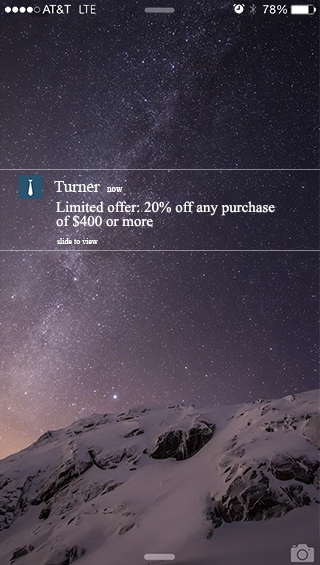
<style>
.page{position:relative;width:320px;height:565px}
.page>*{position:absolute;margin:0}
.t1{font:17px "TimesNewRomanPSMT";color:#ffffff}
.t2{font:9px "TimesNewRomanPSMT";color:#ffffff}
.t3{font:15px/14px "TimesNewRomanPSMT";color:#ffffff}
.t4{font:8px "TimesNewRomanPSMT";color:#ffffff}
</style>
<div class="page">
<p class="t1" style="left:54px;top:181px;width:46px;height:11px">Turner</p>
<p class="t2" style="left:107px;top:187px;width:16px;height:5px">now</p>
<p class="t3" style="left:56px;top:201px;width:219px;height:27px">Limited offer: 20% off any purchase <br>of $400 or more</p>
<p class="t4" style="left:57px;top:238px;width:41px;height:6px">slide to view</p>
</div>
